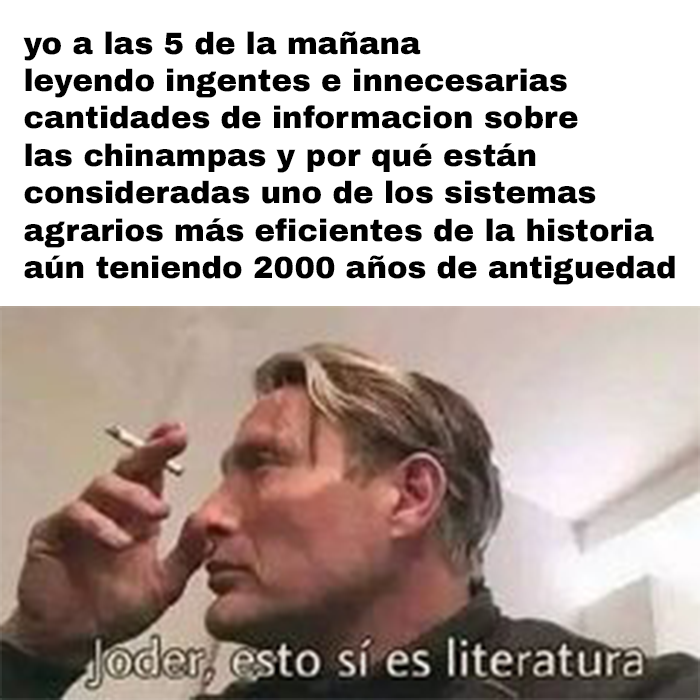
<style>
.page{position:relative;width:700px;height:700px;background:#ffffff}
.page>*{position:absolute;margin:0}
.t1{font:30.9px "ArchivoBlack-Regular";color:#000000}
</style>
<div class="page">
<p class="t1" style="left:23px;top:31px;width:652px;height:254px">yo a las 5 de la mañana<br>leyendo ingentes e innecesarias<br>cantidades de informacion sobre<br>las chinampas y por qué están<br>consideradas uno de los sistemas<br>agrarios más eficientes de la historia<br>aún teniendo 2000 años de antiguedad</p>
</div>
